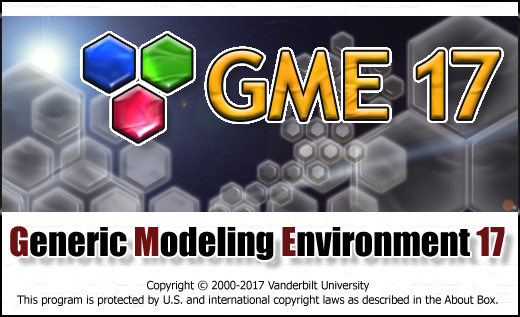
<style>
.page{position:relative;width:520px;height:317px;background:#ffffff}
.page>*{position:absolute;margin:0}
.t1{font:94.1px "TrebuchetMS-Bold";letter-spacing:-0.002em}
.t2{font:94.1px "TrebuchetMS-Bold";letter-spacing:-0.15em}
.t3{font:36.8px "Impact";letter-spacing:-0.002em;color:#000000}
.t4{font:36.8px "Impact";letter-spacing:-0.002em;color:#6b1111}
.t5{font:11.2px/14.3px "Tahoma";letter-spacing:-0.002em;color:#000000}
.t6{font:11.2px/24.5px "Tahoma";letter-spacing:-0.002em;color:#000000}
</style>
<div class="page">
<p class="t1" style="left:208px;top:50px;width:292px;height:70px">GME<span class="t2"> 17</span></p>
<p class="t3" style="left:10px;top:226px;width:495px;height:34px"><span class="t4">G</span>eneric <span class="t4">M</span>odeling <span class="t4">E</span>nvironment <span class="t4">17</span></p>
<p class="t5" style="left:17px;top:280px;width:481px;height:26px;text-align:center"><span class="t6"><br></span>Copyright © 2000-2017 Vanderbilt University<br>This program is protected by U.S. and international copyright laws as described in the About Box.</p>
</div>
